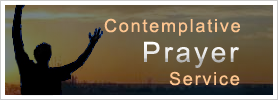
<style>
.page{position:relative;width:278px;height:100px}
.page>*{position:absolute;margin:0}
.t1{font:18px "ArialMT";letter-spacing:0.1em;color:#fdc590}
.t2{font:28px "ArialMT";letter-spacing:0.1em}
</style>
<div class="page">
<p class="t1" style="left:104px;top:18px;width:136px;height:18px">Contemplative</p>
<p class="t2" style="left:144px;top:41px;width:95px;height:27px">Prayer</p>
<p class="t1" style="left:169px;top:71px;width:71px;height:15px">Service</p>
</div>
